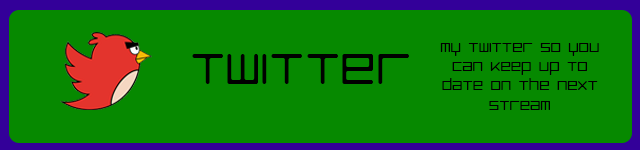
<style>
.page{position:relative;width:640px;height:150px;background:#068900}
.page>*{position:absolute;margin:0}
.t1{font:55px "LuggageRoundLight";color:#000000}
.t2{font:16px "LuggageRoundLight";color:#000000}
</style>
<div class="page">
<p class="t1" style="left:192px;top:54px;width:217px;height:30px">Twitter</p>
<p class="t2" style="left:440px;top:43px;width:159px;height:67px;text-align:center">My twitter so you can keep up to date on the next stream</p>
</div>
